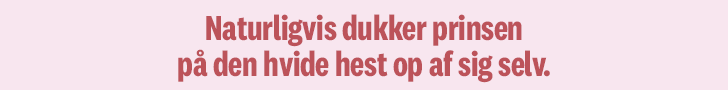
<style>
.page{position:relative;width:728px;height:90px;background:#f8e6ef}
.page>*{position:absolute;margin:0}
.t1{font:36px/36px "National2Condensed-Bold";letter-spacing:-0.008em;color:#bc535a}
</style>
<div class="page">
<p class="t1" style="left:178px;top:14px;width:372px;height:69px;text-align:center">Naturligvis dukker prinsen<br>på den hvide hest op af sig selv.</p>
</div>
